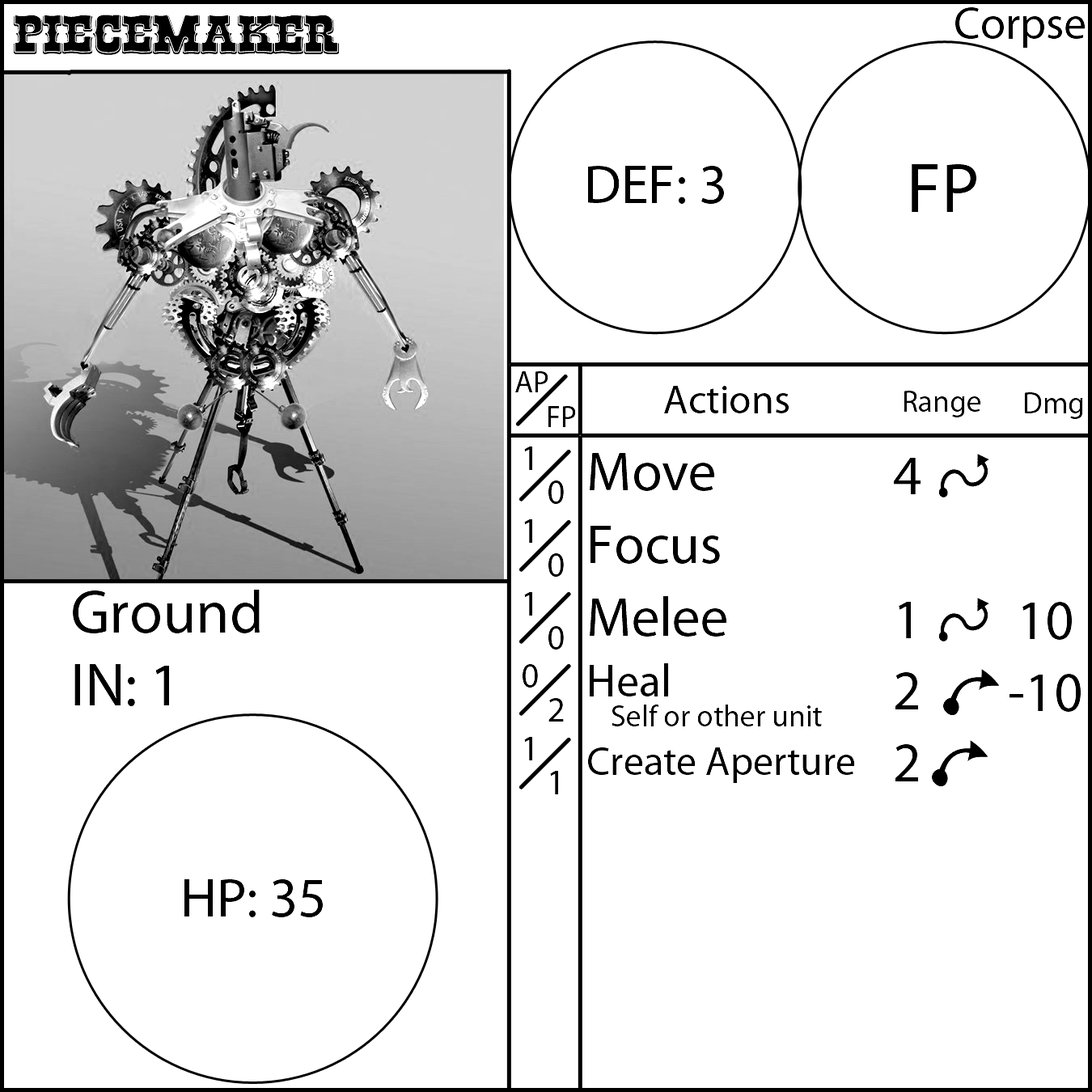
<style>
.page{position:relative;width:1092px;height:1092px;background:#ffffff}
.page>*{position:absolute;margin:0}
.t1{font:55.6px "RioGrande-Bold";color:#000000}
.t2{font:55.6px "MyriadPro-Regular";color:#000000}
.t3{font:70.8px "MyriadPro-Regular";color:#000000}
.t4{font:30.3px "MyriadPro-Regular";color:#000000}
.t5{font:40.4px "MyriadPro-Regular";color:#000000}
.t6{font:35.4px "MyriadPro-Regular";color:#000000}
.t7{font:45.5px "MyriadPro-Regular";color:#000000}
.t8{font:60.7px "MyriadPro-Regular";color:#000000}
</style>
<div class="page">
<p class="t1" style="left:14px;top:15px;width:325px;height:40px">Piecemaker</p>
<p class="t2" style="left:588px;top:166px;width:136px;height:38px">DEF: 3</p>
<p class="t3" style="left:912px;top:164px;width:64px;height:48px">FP</p>
<p class="t4" style="left:515px;top:371px;width:33px;height:21px">AP</p>
<p class="t5" style="left:664px;top:386px;width:125px;height:27px">Actions</p>
<p class="t4" style="left:904px;top:391px;width:77px;height:26px">Range</p>
<p class="t4" style="left:1024px;top:392px;width:59px;height:27px">Dmg</p>
<p class="t4" style="left:548px;top:406px;width:28px;height:21px">FP</p>
<p class="t6" style="left:523px;top:447px;width:15px;height:313px">1<br>1<br>1<br>0<br>1</p>
<p class="t4" style="left:588px;top:453px;width:267px;height:330px"><span class="t2">Move<br>Focus<br>Melee<br></span><span class="t7">Heal<br></span> Self or other unit<br><span class="t5">Create Aperture</span></p>
<p class="t2" style="left:894px;top:458px;width:27px;height:323px;text-align:center">4<br><br>1<br>2<br>2</p>
<p class="t6" style="left:548px;top:480px;width:16px;height:314px">0<br>0<br>0<br>2<br>1</p>
<p class="t8" style="left:73px;top:590px;width:187px;height:116px">Ground<br>IN: 1</p>
<p class="t2" style="left:1009px;top:602px;width:72px;height:110px;text-align:center">10<br>-10</p>
<p class="t2" style="left:184px;top:879px;width:139px;height:38px">HP: 35</p>
</div>
